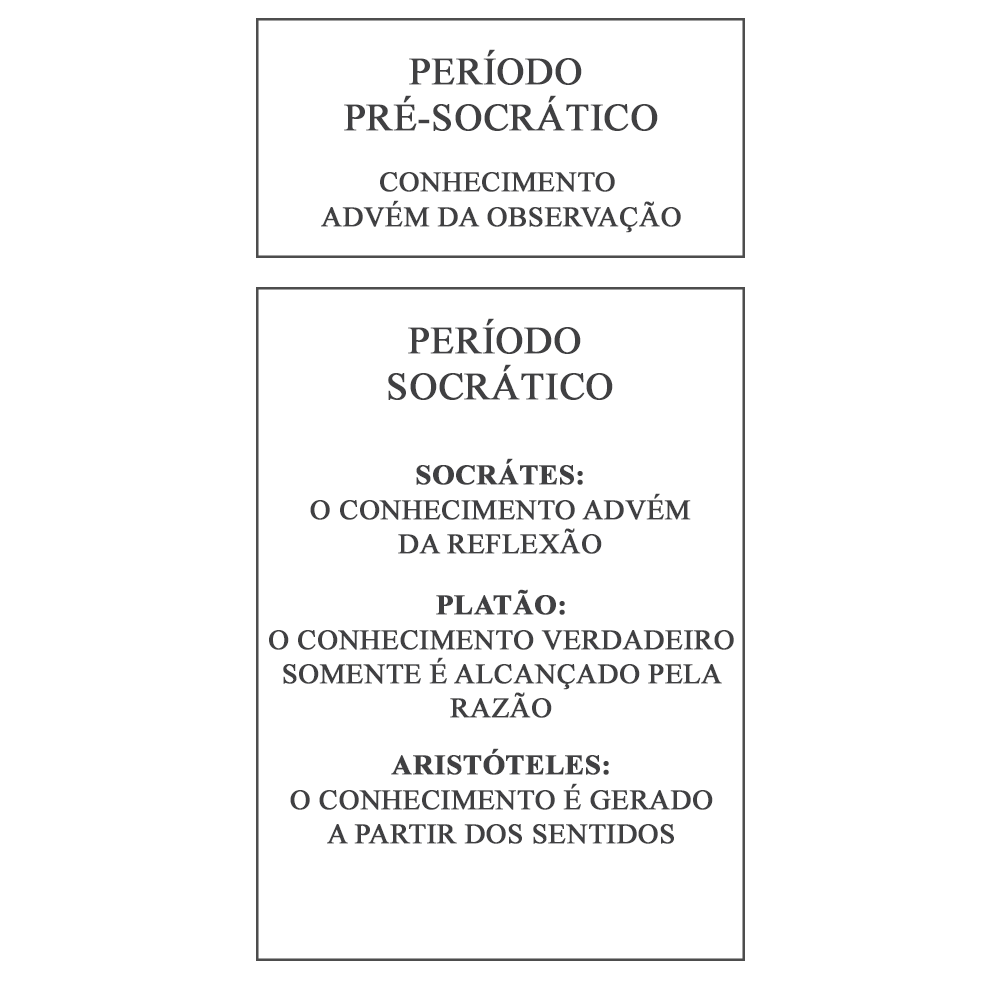
<style>
.page{position:relative;width:1000px;height:1000px;background:#ffffff}
.page>*{position:absolute;margin:0}
.t1{font:38.5px "TimesNewRomanPSMT";color:#404042;font-weight:bold}
.t2{font:28.5px "TimesNewRomanPSMT";color:#404042;font-weight:bold}
.t3{font:28.5px "TimesNewRomanPS-BoldMT";color:#404042;font-weight:bold}
</style>
<div class="page">
<p class="t1" style="left:344px;top:49px;width:314px;height:82px;text-align:center">PERÍODO <br>PRÉ-SOCRÁTICO</p>
<p class="t2" style="left:321px;top:172px;width:360px;height:61px;text-align:center">CONHECIMENTO <br>ADVÉM DA OBSERVAÇÃO</p>
<p class="t1" style="left:388px;top:318px;width:225px;height:82px;text-align:center">PERÍODO <br>SOCRÁTICO</p>
<p class="t2" style="left:310px;top:458px;width:381px;height:96px;text-align:center"><span class="t3">SOCRÁTES:<br></span>O CONHECIMENTO ADVÉM<br>DA REFLEXÃO</p>
<p class="t2" style="left:269px;top:589px;width:465px;height:129px;text-align:center"><span class="t3">PLATÃO:<br></span>O CONHECIMENTO VERDADEIRO<br>SOMENTE É ALCANÇADO PELA<br>RAZÃO</p>
<p class="t2" style="left:290px;top:748px;width:423px;height:96px;text-align:center"><span class="t3">ARISTÓTELES:<br></span>O CONHECIMENTO É GERADO<br>A PARTIR DOS SENTIDOS</p>
</div>
